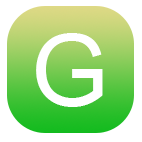
<style>
.page{position:relative;width:142px;height:142px;background:#ffffff}
.page>*{position:absolute;margin:0}
.t1{font:100px "DokChampa";color:#ffffff}
</style>
<div class="page">
<p class="t1" style="left:36px;top:33px;width:67px;height:74px">G</p>
</div>
